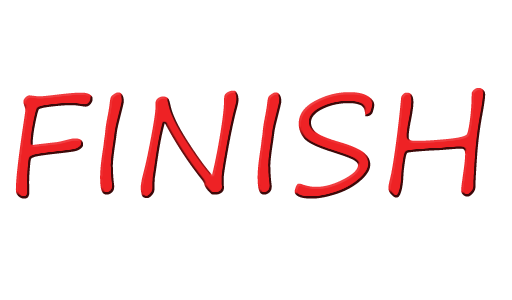
<style>
.page{position:relative;width:512px;height:300px;background:#ffffff}
.page>*{position:absolute;margin:0}
.t1{font:140px "SegoePrint";color:#ee2225}
</style>
<div class="page">
<p class="t1" style="left:15px;top:88px;width:471px;height:111px">FINISH</p>
</div>
